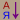
<style>
.page{position:relative;width:20px;height:20px;background:#b5a189}
.page>*{position:absolute;margin:0}
.t1{font:10px "Arimo";color:#990000}
.t2{font:19.9px "ArialMT";color:#700080;font-weight:bold;scale:0.76 1}
.t3{font:10px "Arimo";color:#0000ee}
</style>
<div class="page">
<p class="t1" style="left:3px;top:1px;width:7px;height:8px">А</p>
<p class="t2" style="left:12px;top:1px;width:7px;height:18px">↓</p>
<p class="t3" style="left:3px;top:11px;width:7px;height:8px">Я</p>
</div>
